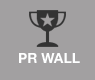
<style>
.page{position:relative;width:95px;height:80px;background:#a2a0a1}
.page>*{position:absolute;margin:0}
.t1{font:14px "HelveticaNeue-Bold";color:#feffff}
</style>
<div class="page">
<p class="t1" style="left:19px;top:53px;width:61px;height:10px">PR WALL</p>
</div>
